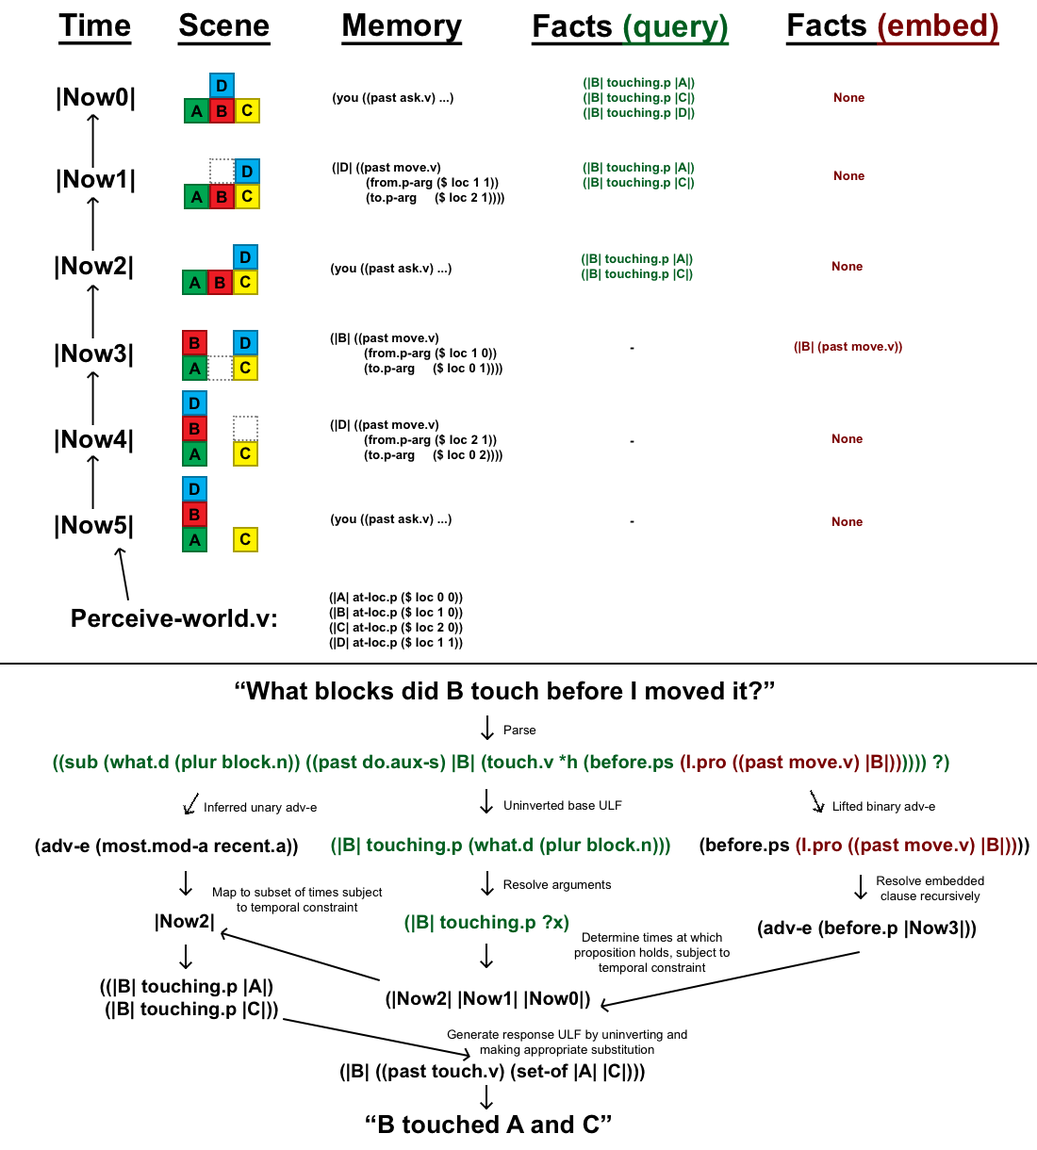
<style>
.page{position:relative;width:1037px;height:1150px;background:#ffffff}
.page>*{position:absolute;margin:0}
.t1{font:31.4px "Arial-BoldMT";color:#000000;text-decoration:underline}
.t2{font:31.4px "Arial-BoldMT";color:#005e20;text-decoration:underline}
.t3{font:31.4px "Arial-BoldMT";color:#790000;text-decoration:underline}
.t4{font:12.6px "Arial-BoldMT";color:#005e20}
.t5{font:25.1px "Arial-BoldMT";color:#000000}
.t6{font:16.3px "Arial-BoldMT";color:#000000}
.t7{font:12.6px "Arial-BoldMT";color:#000000}
.t8{font:12.6px "Arial-BoldMT";color:#790000}
.t9{font:12.6px "ArialMT";color:#000000}
.t10{font:18.9px "Arial-BoldMT";color:#005e20}
.t11{font:18.9px "Arial-BoldMT";color:#790000}
.t12{font:18.9px "Arial-BoldMT";color:#000000}
</style>
<div class="page">
<p class="t1" style="left:58px;top:13px;width:74px;height:32px">Time</p>
<p class="t1" style="left:177px;top:12px;width:94px;height:34px">Scene</p>
<p class="t1" style="left:341px;top:13px;width:122px;height:32px">Memory</p>
<p class="t2" style="left:531px;top:13px;width:199px;height:33px"><span class="t1">Facts </span>(query)</p>
<p class="t3" style="left:785px;top:12px;width:214px;height:34px"><span class="t1">Facts </span>(embed)</p>
<p class="t4" style="left:583px;top:77px;width:112px;height:43px;text-align:center">(|B| touching.p |A|)<br>(|B| touching.p |C|)<br>(|B| touching.p |D|)</p>
<p class="t5" style="left:57px;top:87px;width:78px;height:24px">|Now0|</p>
<p class="t6" style="left:217px;top:79px;width:10px;height:12px">D</p>
<p class="t7" style="left:333px;top:92px;width:120px;height:13px">(you ((past ask.v) ...)</p>
<p class="t8" style="left:834px;top:92px;width:30px;height:11px">None</p>
<p class="t6" style="left:190px;top:105px;width:13px;height:12px">A</p>
<p class="t6" style="left:217px;top:105px;width:10px;height:12px">B</p>
<p class="t6" style="left:241px;top:104px;width:12px;height:13px">C</p>
<p class="t5" style="left:57px;top:169px;width:78px;height:24px">|Now1|</p>
<p class="t6" style="left:242px;top:165px;width:11px;height:12px">D</p>
<p class="t7" style="left:332px;top:162px;width:172px;height:43px">(|D| ((past move.v)<br> (from.p-arg ($ loc 1 1))<br> (to.p-arg     ($ loc 2 1))))</p>
<p class="t4" style="left:583px;top:162px;width:112px;height:27px">(|B| touching.p |A|)<br>(|B| touching.p |C|)</p>
<p class="t8" style="left:834px;top:171px;width:30px;height:10px">None</p>
<p class="t6" style="left:190px;top:190px;width:13px;height:13px">A</p>
<p class="t6" style="left:217px;top:190px;width:10px;height:13px">B</p>
<p class="t6" style="left:241px;top:189px;width:12px;height:14px">C</p>
<p class="t5" style="left:55px;top:255px;width:78px;height:25px">|Now2|</p>
<p class="t6" style="left:240px;top:251px;width:11px;height:12px">D</p>
<p class="t4" style="left:582px;top:254px;width:111px;height:27px;text-align:center">(|B| touching.p |A|)<br>(|B| touching.p |C|)</p>
<p class="t7" style="left:331px;top:263px;width:121px;height:12px">(you ((past ask.v) ...)</p>
<p class="t8" style="left:832px;top:261px;width:31px;height:10px">None</p>
<p class="t6" style="left:189px;top:276px;width:12px;height:12px">A</p>
<p class="t6" style="left:215px;top:276px;width:10px;height:12px">B</p>
<p class="t6" style="left:239px;top:275px;width:12px;height:13px">C</p>
<p class="t6" style="left:189px;top:337px;width:11px;height:12px">B</p>
<p class="t6" style="left:240px;top:337px;width:11px;height:12px">D</p>
<p class="t7" style="left:330px;top:333px;width:172px;height:42px">(|B| ((past move.v)<br> (from.p-arg ($ loc 1 0))<br> (to.p-arg     ($ loc 0 1))))</p>
<p class="t8" style="left:794px;top:341px;width:108px;height:12px">(|B| (past move.v))</p>
<p class="t5" style="left:55px;top:343px;width:78px;height:25px">|Now3|</p>
<p class="t7" style="left:630px;top:347px;width:4px;height:3px">-</p>
<p class="t6" style="left:189px;top:362px;width:12px;height:12px">A</p>
<p class="t6" style="left:239px;top:361px;width:12px;height:13px">C</p>
<p class="t6" style="left:189px;top:397px;width:11px;height:12px">D</p>
<p class="t6" style="left:189px;top:422px;width:11px;height:13px">B</p>
<p class="t7" style="left:330px;top:419px;width:172px;height:43px">(|D| ((past move.v)<br> (from.p-arg ($ loc 2 1))<br> (to.p-arg     ($ loc 0 2))))</p>
<p class="t5" style="left:55px;top:429px;width:78px;height:24px">|Now4|</p>
<p class="t8" style="left:832px;top:434px;width:31px;height:10px">None</p>
<p class="t6" style="left:189px;top:448px;width:12px;height:12px">A</p>
<p class="t6" style="left:239px;top:447px;width:12px;height:13px">C</p>
<p class="t7" style="left:630px;top:440px;width:4px;height:3px">-</p>
<p class="t6" style="left:189px;top:483px;width:11px;height:12px">D</p>
<p class="t6" style="left:189px;top:508px;width:11px;height:12px">B</p>
<p class="t5" style="left:55px;top:515px;width:78px;height:24px">|Now5|</p>
<p class="t7" style="left:331px;top:514px;width:121px;height:12px">(you ((past ask.v) ...)</p>
<p class="t7" style="left:630px;top:520px;width:4px;height:3px">-</p>
<p class="t8" style="left:832px;top:517px;width:31px;height:10px">None</p>
<p class="t6" style="left:189px;top:534px;width:12px;height:12px">A</p>
<p class="t6" style="left:239px;top:533px;width:12px;height:13px">C</p>
<p class="t7" style="left:329px;top:591px;width:134px;height:58px;text-align:center">(|A| at-loc.p ($ loc 0 0))<br>(|B| at-loc.p ($ loc 1 0))<br>(|C| at-loc.p ($ loc 2 0))<br>(|D| at-loc.p ($ loc 1 1))</p>
<p class="t5" style="left:72px;top:608px;width:204px;height:20px">Perceive-world.v:</p>
<p class="t5" style="left:235px;top:681px;width:539px;height:19px">“What blocks did B touch before I moved it?”</p>
<p class="t9" style="left:504px;top:725px;width:32px;height:10px">Parse</p>
<p class="t10" style="left:53px;top:754px;width:896px;height:19px">((sub (what.d (plur block.n)) ((past do.aux-s) |B| (touch.v *h (before.ps <span class="t11">(I.pro ((past move.v) |B|))</span>)))) ?)</p>
<p class="t9" style="left:205px;top:802px;width:112px;height:12px">Inferred unary adv-e</p>
<p class="t9" style="left:504px;top:800px;width:118px;height:11px">Uninverted base ULF</p>
<p class="t9" style="left:833px;top:801px;width:102px;height:12px">Lifted binary adv-e</p>
<p class="t12" style="left:35px;top:838px;width:263px;height:19px">(adv-e (most.mod-a recent.a))</p>
<p class="t10" style="left:331px;top:837px;width:339px;height:19px">(|B| touching.p (what.d (plur block.n)))</p>
<p class="t11" style="left:699px;top:837px;width:330px;height:19px"><span class="t12">(before.ps </span>(I.pro ((past move.v) |B|))<span class="t12">))</span></p>
<p class="t9" style="left:503px;top:879px;width:109px;height:13px">Resolve arguments</p>
<p class="t9" style="left:877px;top:876px;width:107px;height:27px;text-align:center">Resolve embedded<br>clause recursively</p>
<p class="t9" style="left:213px;top:887px;width:170px;height:27px;text-align:center">Map to subset of times subject to temporal constraint</p>
<p class="t12" style="left:156px;top:913px;width:58px;height:19px">|Now2|</p>
<p class="t10" style="left:404px;top:914px;width:165px;height:19px">(|B| touching.p ?x)</p>
<p class="t12" style="left:758px;top:920px;width:219px;height:19px">(adv-e (before.p |Now3|))</p>
<p class="t9" style="left:574px;top:932px;width:156px;height:43px;text-align:center">Determine times at which proposition holds, subject to temporal constraint</p>
<p class="t12" style="left:100px;top:978px;width:178px;height:42px;text-align:center">((|B| touching.p |A|) <br>  (|B| touching.p |C|))</p>
<p class="t12" style="left:386px;top:991px;width:204px;height:19px">(|Now2| |Now1| |Now0|)</p>
<p class="t9" style="left:447px;top:1029px;width:240px;height:28px;text-align:center">Generate response ULF by uninverting and<br>making appropriate substitution</p>
<p class="t12" style="left:340px;top:1063px;width:305px;height:19px">(|B| ((past touch.v) (set-of |A| |C|)))</p>
<p class="t5" style="left:366px;top:1114px;width:245px;height:20px">“B touched A and C”</p>
</div>
